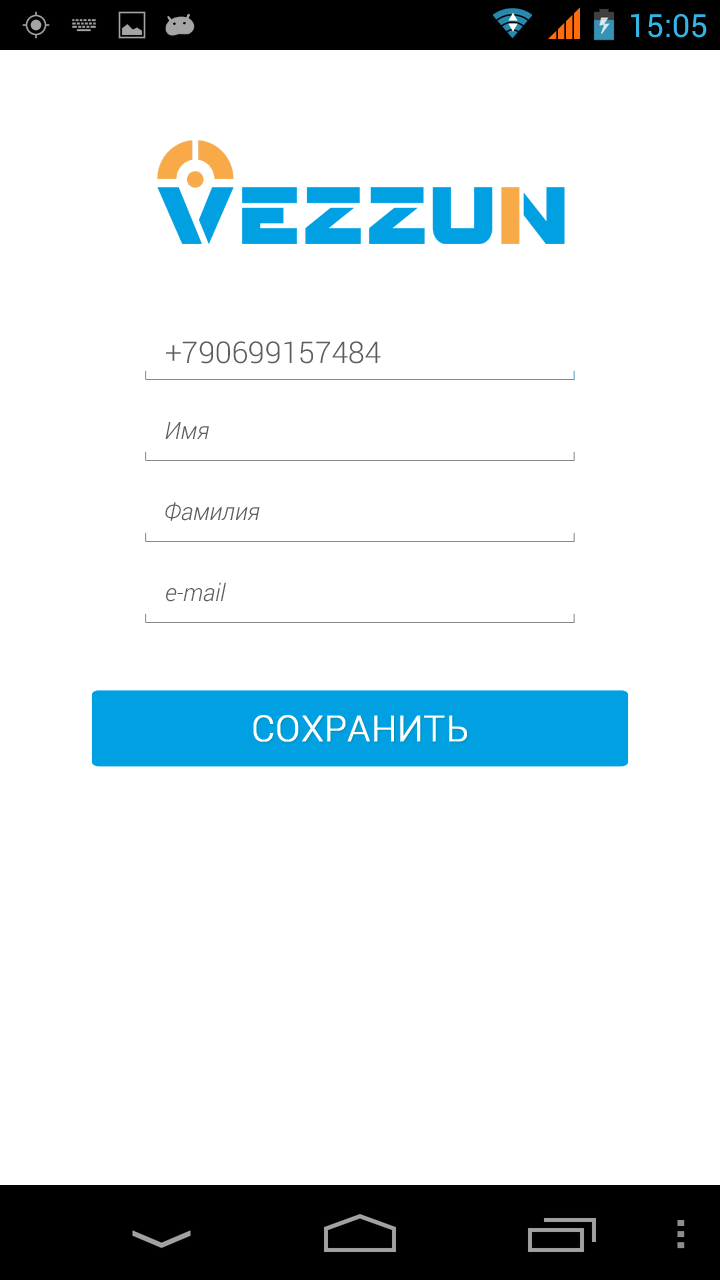
<style>
.page{position:relative;width:720px;height:1280px;background:#ffffff}
.page>*{position:absolute;margin:0}
.t1{font:30px "Roboto-Light";color:#5c5c5c}
.t2{font:24px "Roboto-LightItalic";color:#5c5c5c}
.t3{font:36px "Roboto-Light";color:#ffffff;text-transform:uppercase;font-weight:bold}
</style>
<div class="page">
<p class="t1" style="left:166px;top:341px;width:215px;height:23px">+790699157484</p>
<p class="t2" style="left:165px;top:422px;width:44px;height:17px">Имя</p>
<p class="t2" style="left:165px;top:502px;width:95px;height:19px">Фамилия</p>
<p class="t2" style="left:166px;top:582px;width:60px;height:20px">e-mail</p>
<p class="t3" style="left:253px;top:715px;width:214px;height:27px">СОХРАНИТЬ</p>
</div>
